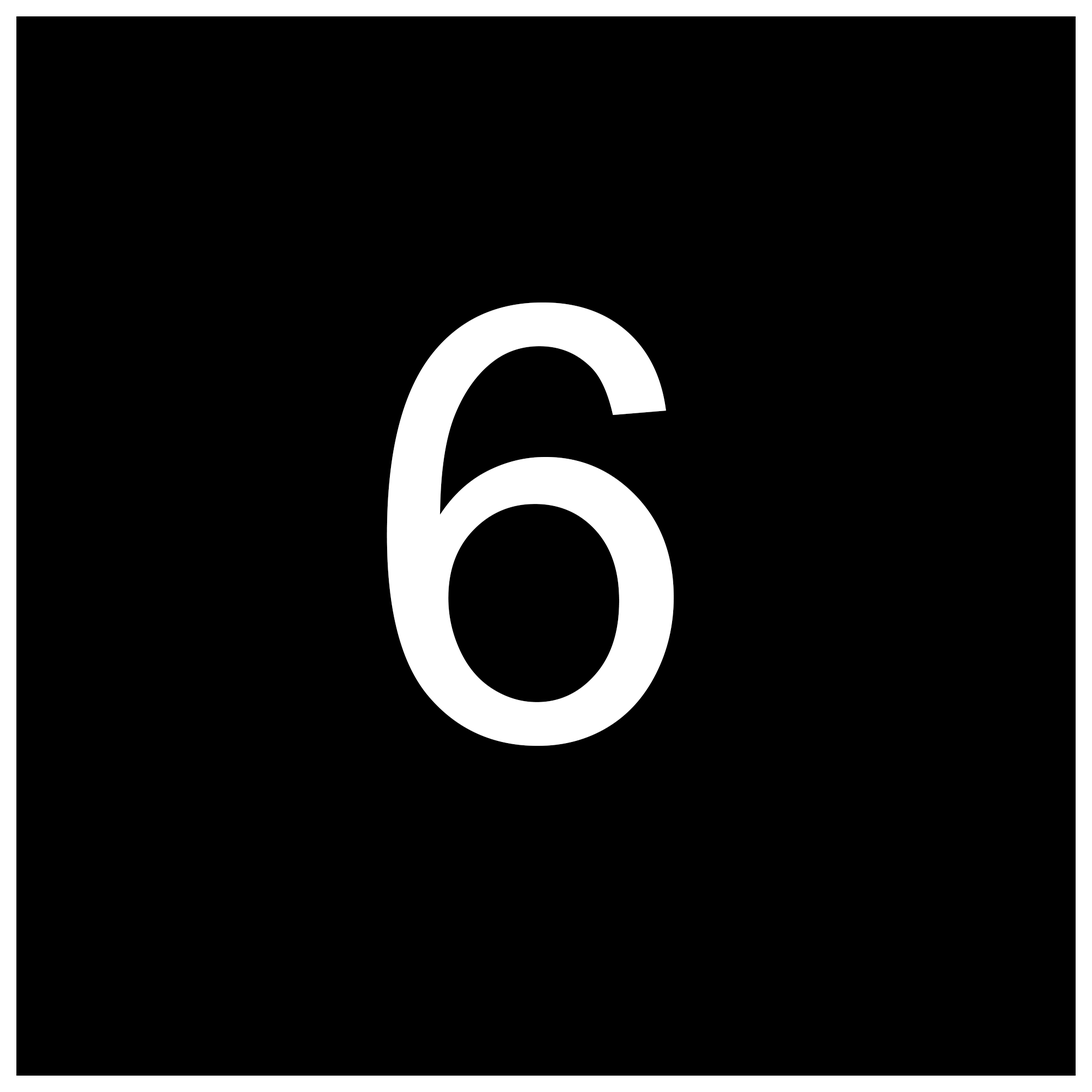
<style>
.page{position:relative;width:1092px;height:1092px;background:#000000}
.page>*{position:absolute;margin:0}
.t1{font:606.7px "ArialMT";color:#ffffff}
</style>
<div class="page">
<p class="t1" style="left:387px;top:302px;width:287px;height:444px">6</p>
</div>
